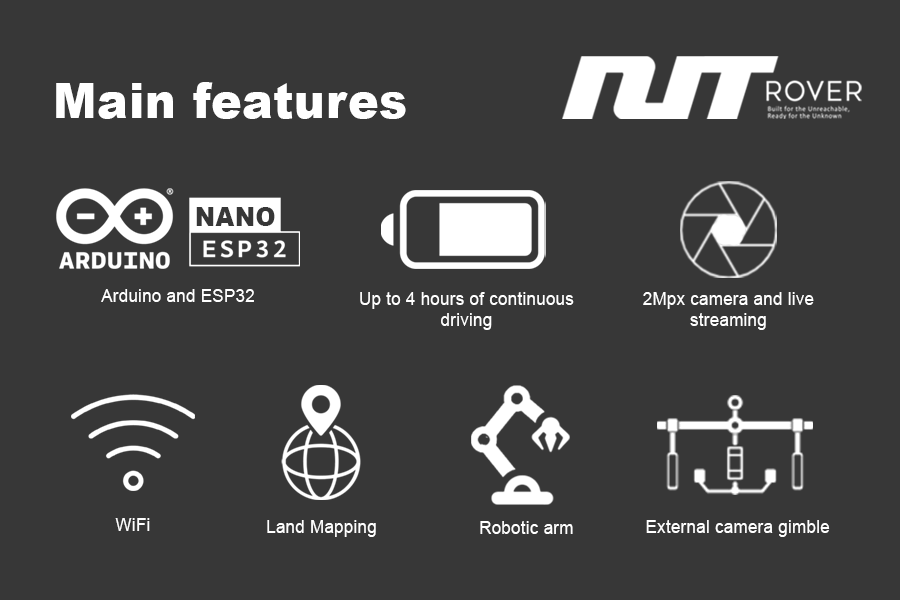
<style>
.page{position:relative;width:900px;height:600px;background:#373737}
.page>*{position:absolute;margin:0}
.t1{font:48.7px "Arial-Black";letter-spacing:0.02em;color:#ffffff;scale:0.94 1}
.t2{font:25.7px "Arial-Black";letter-spacing:0.02em;color:#373737;scale:0.94 1}
.t3{font:17.9px "ArialMT";letter-spacing:0.02em;color:#ffffff;scale:0.94 1}
.t4{font:17.9px/20.8px "ArialMT";letter-spacing:0.02em;color:#ffffff;scale:0.94 1}
</style>
<div class="page">
<p class="t1" style="left:56px;top:82px;width:350px;height:37px">Main features</p>
<p class="t2" style="left:196px;top:207px;width:79px;height:19px">NANO</p>
<p class="t3" style="left:101px;top:289px;width:153px;height:13px">Arduino and ESP32</p>
<p class="t4" style="left:360px;top:292px;width:214px;height:38px;text-align:center">Up to 4 hours of continuous<br>driving</p>
<p class="t4" style="left:643px;top:292px;width:171px;height:38px;text-align:center">2Mpx camera and live<br>streaming</p>
<p class="t3" style="left:115px;top:518px;width:35px;height:13px">WiFi</p>
<p class="t3" style="left:267px;top:520px;width:109px;height:17px">Land Mapping</p>
<p class="t3" style="left:480px;top:521px;width:93px;height:13px">Robotic arm</p>
<p class="t3" style="left:646px;top:520px;width:184px;height:17px">External camera gimble</p>
</div>
